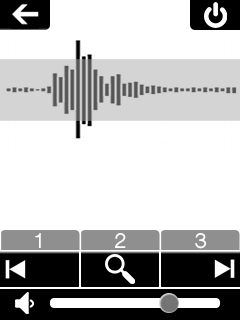
<style>
.page{position:relative;width:240px;height:320px;background:#ffffff}
.page>*{position:absolute;margin:0}
.t1{font:19.7px "ShreeDev0714-Bold";color:#ffffff}
</style>
<div class="page">
<p class="t1" style="left:35px;top:233px;width:6px;height:15px">1</p>
<p class="t1" style="left:115px;top:233px;width:11px;height:15px">2</p>
<p class="t1" style="left:195px;top:233px;width:11px;height:16px">3</p>
</div>
